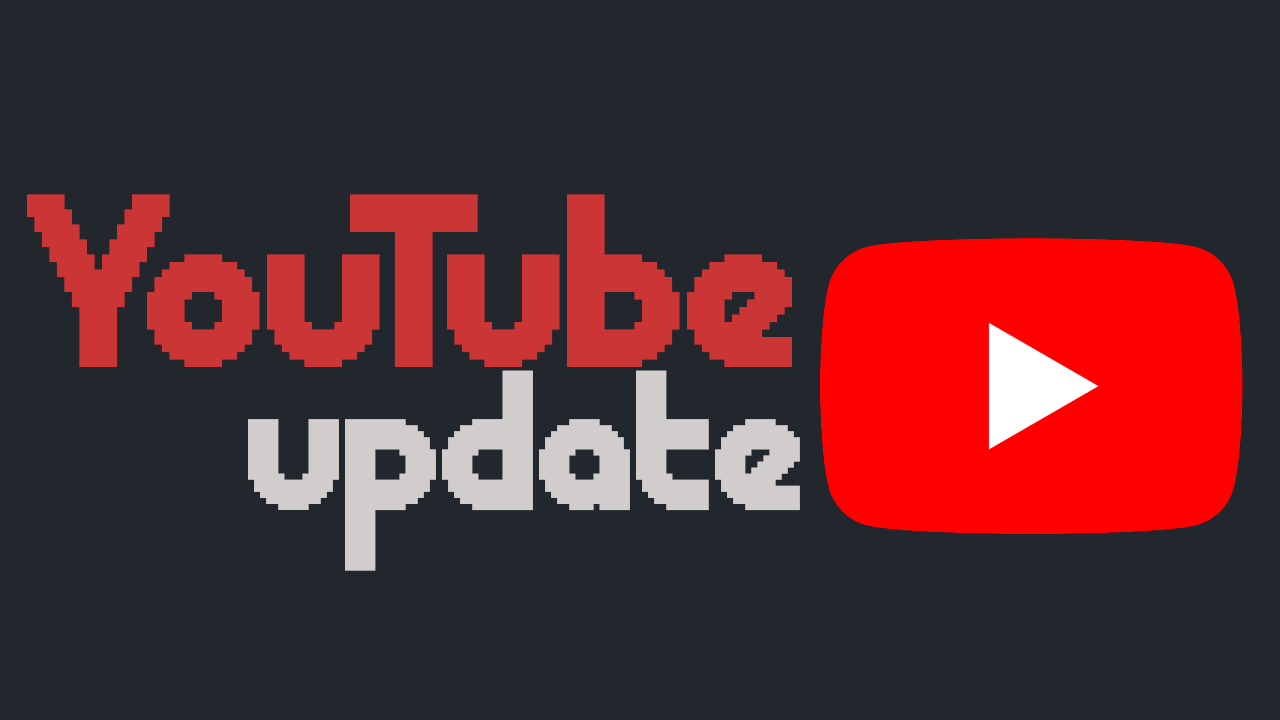
<style>
.page{position:relative;width:1280px;height:720px;background:#22272e}
.page>*{position:absolute;margin:0}
.t1{font:247.6px "ChevyRay---Roundabout";color:#cb3535}
.t2{font:200px "ChevyRay---Roundabout";color:#d2cdcd}
</style>
<div class="page">
<p class="t1" style="left:27px;top:194px;width:765px;height:173px">YouTube</p>
<p class="t2" style="left:248px;top:370px;width:552px;height:201px">update</p>
</div>
